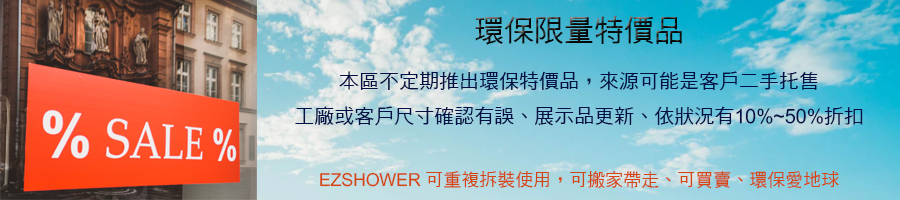
<style>
.page{position:relative;width:900px;height:200px}
.page>*{position:absolute;margin:0}
.t1{font:30px "DFHei-Md-HKP-BF";color:#0a0c0c}
.t2{font:20px "DFHei-Md-HKP-BF";color:#040f45}
.t3{font:18px "DFHei-Md-HKP-BF";color:#d54512}
</style>
<div class="page">
<p class="t1" style="left:475px;top:16px;width:207px;height:29px">環保限量特價品</p>
<p class="t2" style="left:295px;top:71px;width:568px;height:55px;text-align:center">本區不定期推出環保特價品，來源可能是客戶二手托售<br>工廠或客戶尺寸確認有誤、展示品更新、依狀況有10%~50%折扣</p>
<p class="t3" style="left:320px;top:171px;width:519px;height:18px">EZSHOWER 可重複拆裝使用，可搬家帶走、可買賣、環保愛地球</p>
</div>
